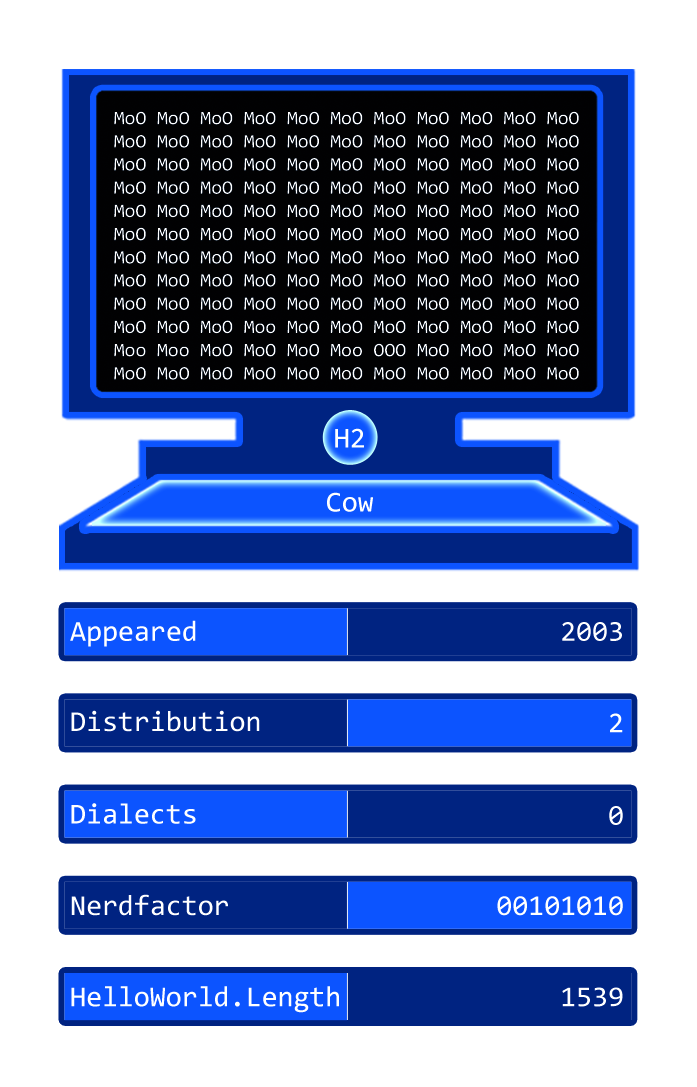
<style>
.page{position:relative;width:697px;height:1087px;background:#ffffff}
.page>*{position:absolute;margin:0}
.t1{font:19.3px "Consolas";color:#ffffff}
.t2{font:29px "Consolas";color:#ffffff}
</style>
<div class="page">
<p class="t1" style="left:114px;top:111px;width:465px;height:269px">MoO MoO MoO MoO MoO MoO MoO MoO MoO MoO MoO<br>MoO MoO MoO MoO MoO MoO MoO MoO MoO MoO MoO<br>MoO MoO MoO MoO MoO MoO MoO MoO MoO MoO MoO<br>MoO MoO MoO MoO MoO MoO MoO MoO MoO MoO MoO<br>MoO MoO MoO MoO MoO MoO MoO MoO MoO MoO MoO<br>MoO MoO MoO MoO MoO MoO MoO MoO MoO MoO MoO<br>MoO MoO MoO MoO MoO MoO Moo MoO MoO MoO MoO<br>MoO MoO MoO MoO MoO MoO MoO MoO MoO MoO MoO<br>MoO MoO MoO MoO MoO MoO MoO MoO MoO MoO MoO<br>MoO MoO MoO Moo MoO MoO MoO MoO MoO MoO MoO<br>Moo Moo MoO MoO MoO Moo OOO MoO MoO MoO MoO<br>MoO MoO MoO MoO MoO MoO MoO MoO MoO MoO MoO</p>
<p class="t2" style="left:335px;top:428px;width:29px;height:20px">H2</p>
<p class="t2" style="left:327px;top:492px;width:46px;height:20px">Cow</p>
<p class="t2" style="left:70px;top:620px;width:126px;height:27px">Appeared</p>
<p class="t2" style="left:562px;top:622px;width:60px;height:19px">2003</p>
<p class="t2" style="left:71px;top:710px;width:189px;height:22px">Distribution</p>
<p class="t2" style="left:610px;top:713px;width:13px;height:20px">2</p>
<p class="t2" style="left:71px;top:803px;width:125px;height:21px">Dialects</p>
<p class="t2" style="left:609px;top:806px;width:14px;height:19px">0</p>
<p class="t2" style="left:71px;top:894px;width:157px;height:22px">Nerdfactor</p>
<p class="t2" style="left:497px;top:896px;width:126px;height:20px">00101010</p>
<p class="t2" style="left:71px;top:986px;width:268px;height:27px">HelloWorld.Length</p>
<p class="t2" style="left:562px;top:987px;width:61px;height:20px">1539</p>
</div>
